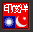
<style>
.page{position:relative;width:33px;height:32px;background:#333333}
.page>*{position:absolute;margin:0}
.t1{font:10.4px "SimSun";letter-spacing:-0.25em;color:#ffffff}
</style>
<div class="page">
<p class="t1" style="left:4px;top:4px;width:24px;height:9px">印度洋</p>
</div>
